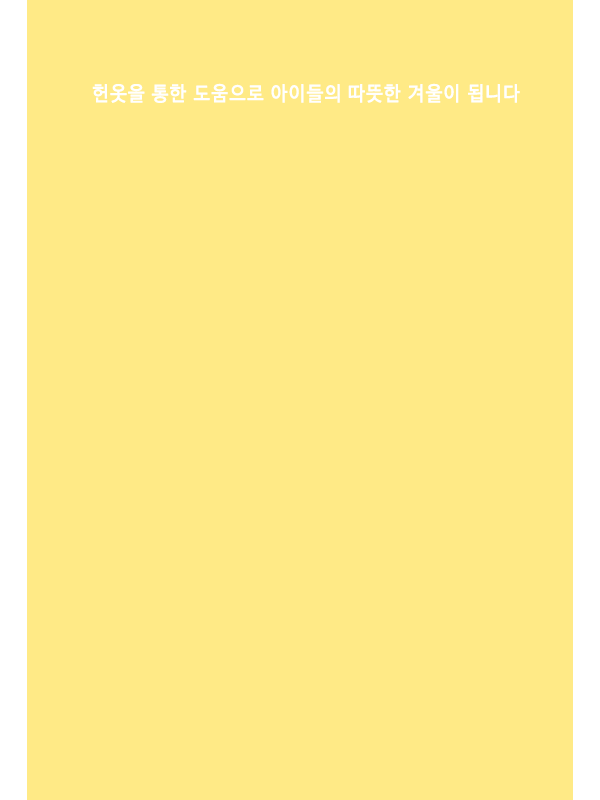
<style>
.page{position:relative;width:600px;height:800px;background:#ffea86}
.page>*{position:absolute;margin:0}
.t1{font:19.8px "NanumBarunGothicOTF";letter-spacing:0.075em;color:#ffffff;font-weight:bold;scale:0.91 1}
</style>
<div class="page">
<p class="t1" style="left:92px;top:83px;width:428px;height:20px">헌옷을 통한 도움으로 아이들의 따뜻한 겨울이 됩니다</p>
</div>
